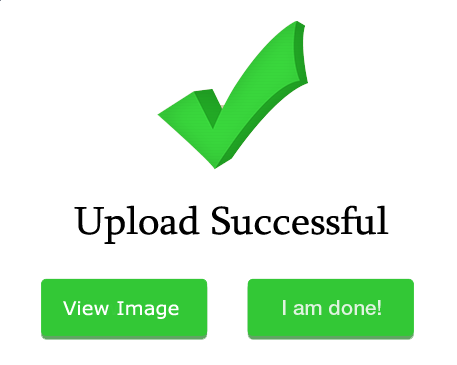
<style>
.page{position:relative;width:457px;height:365px;background:#ffffff}
.page>*{position:absolute;margin:0}
.t1{font:40px "Sylfaen";color:#000000;scale:1.05 1}
.t2{font:18.7px "Verdana";color:#ffffff;scale:1.05 1}
</style>
<div class="page">
<p class="t1" style="left:74px;top:205px;width:315px;height:39px">Upload Successful</p>
<p class="t2" style="left:63px;top:301px;width:116px;height:18px">View Image</p>
</div>
